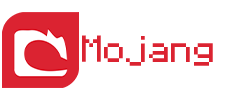
<style>
.page{position:relative;width:230px;height:100px;background:#ffffff}
.page>*{position:absolute;margin:0}
.t1{font:37.3px "Minecraft-Regular";color:#db2331}
</style>
<div class="page">
<p class="t1" style="left:82px;top:35px;width:131px;height:31px">Mojang</p>
</div>
